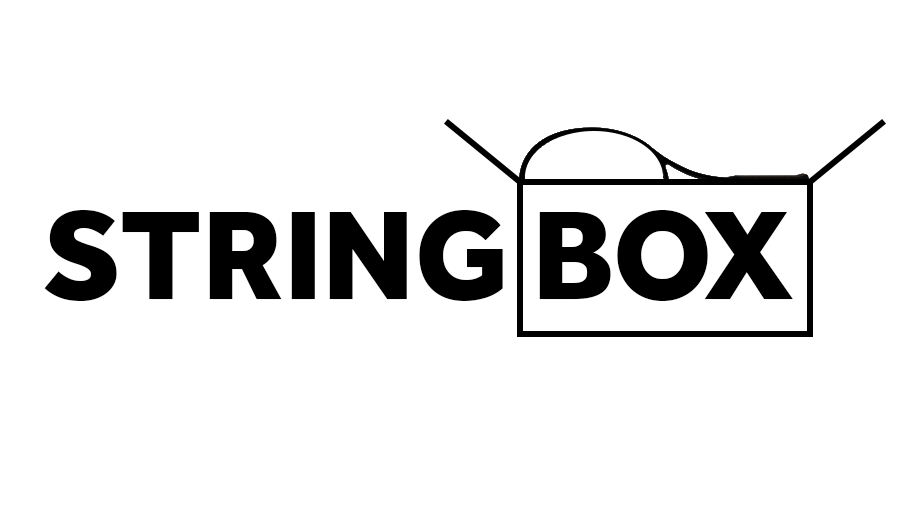
<style>
.page{position:relative;width:918px;height:516px;background:#ffffff}
.page>*{position:absolute;margin:0}
.t1{font:130px "Effra-Heavy";color:#000000}
</style>
<div class="page">
<p class="t1" style="left:44px;top:210px;width:749px;height:91px">STRING BOX</p>
</div>
